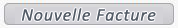
<style>
.page{position:relative;width:178px;height:28px;background:#d3d2d7}
.page>*{position:absolute;margin:0}
.t1{font:17.8px "Calibri-Italic";letter-spacing:0.04em;color:#535b66}
</style>
<div class="page">
<p class="t1" style="left:22px;top:8px;width:134px;height:13px">Nouvelle Facture</p>
</div>
